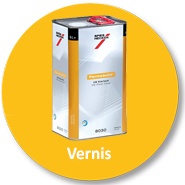
<style>
.page{position:relative;width:185px;height:185px;background:#fcbf18}
.page>*{position:absolute;margin:0}
.t1{font:17.8px "Calibri-Bold";color:#ffffff}
</style>
<div class="page">
<p class="t1" style="left:67px;top:147px;width:44px;height:13px">Vernis</p>
</div>
